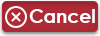
<style>
.page{position:relative;width:100px;height:36px;background:#af2a37}
.page>*{position:absolute;margin:0}
.t1{font:18.8px "CenturyGothic-Bold";color:#ffffff}
</style>
<div class="page">
<p class="t1" style="left:29px;top:9px;width:66px;height:14px">Cancel</p>
</div>
